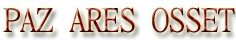
<style>
.page{position:relative;width:236px;height:45px;background:#ffffff}
.page>*{position:absolute;margin:0}
.t1{font:33px "Ming-Lt-HKSCS-UNI-H"}
</style>
<div class="page">
<p class="t1" style="left:3px;top:7px;width:232px;height:26px">PAZ ARES OSSET</p>
</div>
